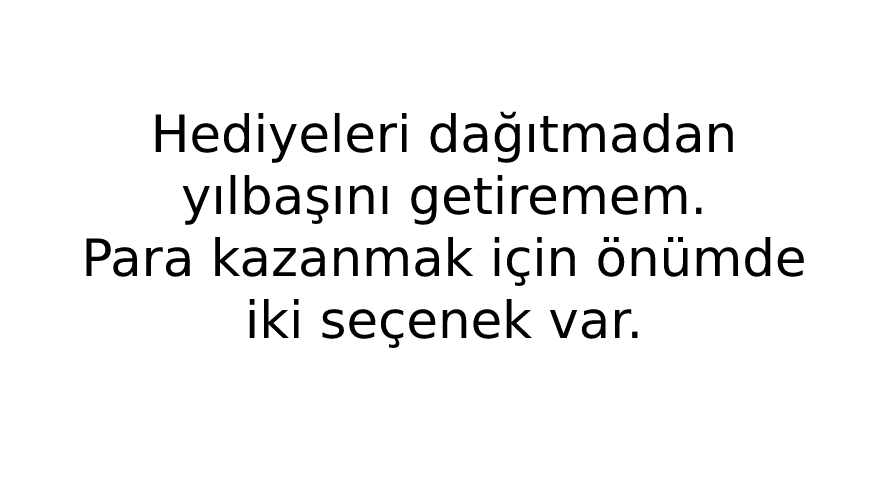
<style>
.page{position:relative;width:889px;height:500px;background:#ffffff}
.page>*{position:absolute;margin:0}
.t1{font:51.4px "DejaVuSans";color:#000000}
</style>
<div class="page">
<p class="t1" style="left:86px;top:111px;width:718px;height:237px;text-align:center">Hediyeleri dağıtmadan<br>yılbaşını getiremem.<br>Para kazanmak için önümde<br>iki seçenek var.</p>
</div>
